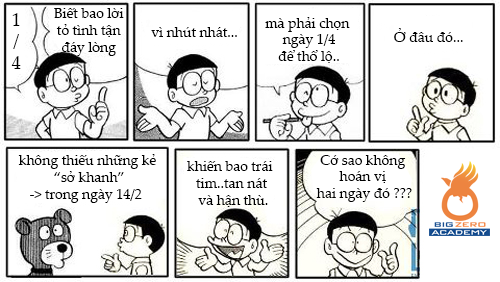
<style>
.page{position:relative;width:500px;height:282px;background:#ffffff}
.page>*{position:absolute;margin:0}
.t1{font:18px "PalatinoLinotype-Roman";color:#010101}
.t2{font:14px "PalatinoLinotype-Roman";color:#000000}
</style>
<div class="page">
<p class="t1" style="left:11px;top:13px;width:10px;height:56px;text-align:center">1<br>/<br>4</p>
<p class="t2" style="left:54px;top:8px;width:70px;height:48px;text-align:center">Biết bao lời<br> tỏ tình tận <br>đáy lòng</p>
<p class="t2" style="left:265px;top:17px;width:85px;height:46px;text-align:center">mà phải chọn <br>ngày 1/4<br>để thổ lộ..</p>
<p class="t2" style="left:151px;top:27px;width:86px;height:10px">vì nhút nhát...</p>
<p class="t2" style="left:394px;top:28px;width:69px;height:14px">Ở đâu đó...</p>
<p class="t2" style="left:18px;top:154px;width:138px;height:49px;text-align:center">không thiếu những kẻ<br> “sở khanh”<br>-&gt; trong ngày 14/2</p>
<p class="t2" style="left:187px;top:161px;width:86px;height:46px;text-align:center">khiến bao trái <br>tim..tan nát<br> và hận thù.</p>
<p class="t2" style="left:316px;top:155px;width:96px;height:47px;text-align:center">Cớ sao không <br>hoán vị <br>hai ngày đó ???</p>
</div>
